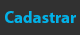
<style>
.page{position:relative;width:80px;height:35px;background:#313131}
.page>*{position:absolute;margin:0}
.t1{font:16.7px "MyriadPro-Bold";color:#00b2e8}
</style>
<div class="page">
<p class="t1" style="left:5px;top:11px;width:71px;height:12px">Cadastrar</p>
</div>
